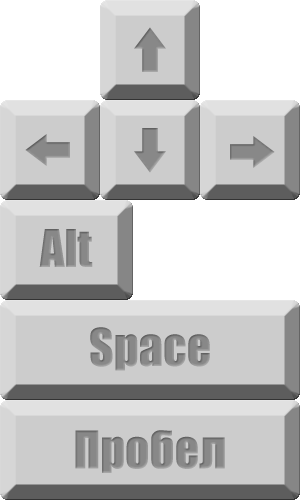
<style>
.page{position:relative;width:300px;height:500px;background:#cccccc}
.page>*{position:absolute;margin:0}
.t1{font:48px "Impact";color:#888888}
</style>
<div class="page">
<p class="t1" style="left:39px;top:229px;width:54px;height:38px">Alt</p>
<p class="t1" style="left:90px;top:327px;width:120px;height:44px">Space</p>
<p class="t1" style="left:75px;top:430px;width:150px;height:43px">Пробел</p>
</div>
